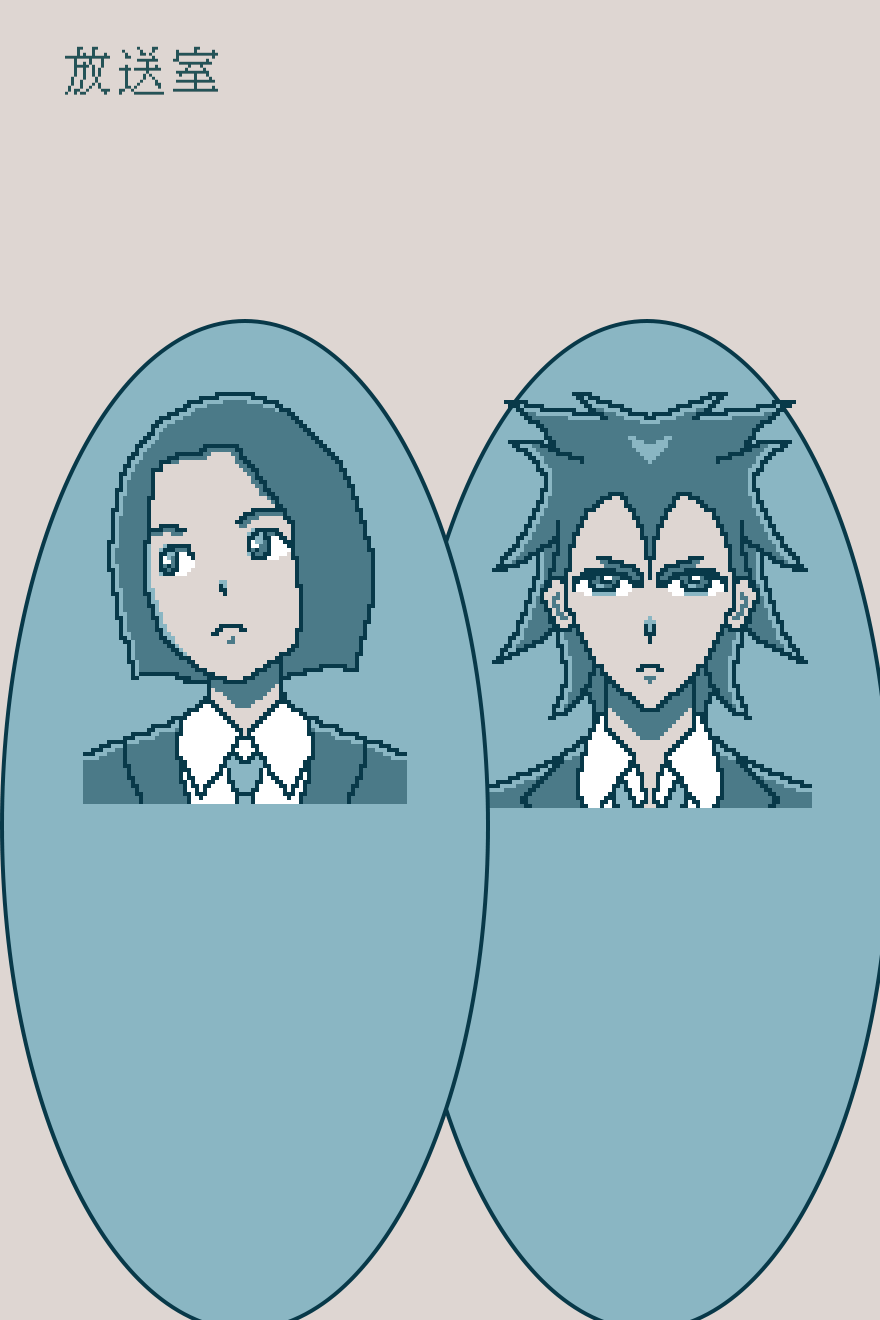
<style>
.page{position:relative;width:880px;height:1320px;background:#8ab6c3}
.page>*{position:absolute;margin:0}
.t1{font:48px "KH-Dot-kagurazaka-16";letter-spacing:0.14em;color:#1e4f5e}
</style>
<div class="page">
<p class="t1" style="left:65px;top:46px;width:153px;height:49px">放送室</p>
</div>
